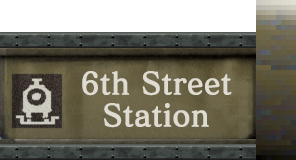
<style>
.page{position:relative;width:296px;height:160px}
.page>*{position:absolute;margin:0}
.t1{font:30px/32px "MatisseVPro-DB";color:#dedbd0;font-weight:bold;scale:0.95 1}
</style>
<div class="page">
<p class="t1" style="left:82px;top:71px;width:150px;height:57px;text-align:center">6th Street<br>Station</p>
</div>
